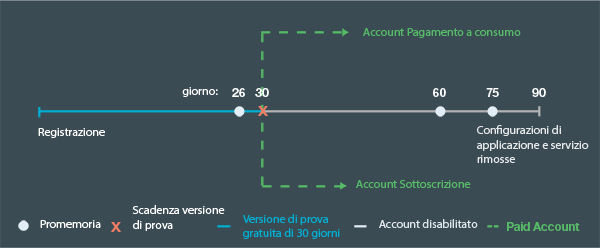
<style>
.page{position:relative;width:600px;height:248px;background:#3b4b54}
.page>*{position:absolute;margin:0}
.t1{font:11.9px "MyriadPro-Regular";color:#56bb66}
.t2{font:11.9px "MyriadPro-Regular";color:#ffffff}
.t3{font:11.9px "HelvNeueBoldforIBM";color:#ffffff}
.t4{font:12.7px "HelvNeueBoldforIBM";color:#f47d64;scale:1.17 1}
.t5{font:11.9px "MyriadPro-Regular";color:#e5e7e8}
.t6{font:11.9px "MyriadPro-Regular";color:#00aed1}
.t7{font:11.9px "MyriadPro-Regular";color:#dfe6eb}
.t8{font:11.9px "HelvNeueBoldforIBM";color:#56bb66}
</style>
<div class="page">
<p class="t1" style="left:363px;top:28px;width:158px;height:10px">Account Pagamento a consumo</p>
<p class="t2" style="left:182px;top:87px;width:36px;height:10px">giorno:</p>
<p class="t3" style="left:232px;top:88px;width:13px;height:9px">26</p>
<p class="t3" style="left:255px;top:88px;width:14px;height:9px">30</p>
<p class="t3" style="left:433px;top:88px;width:13px;height:9px">60</p>
<p class="t3" style="left:486px;top:88px;width:13px;height:9px">75</p>
<p class="t3" style="left:532px;top:88px;width:14px;height:9px">90</p>
<p class="t4" style="left:258px;top:106px;width:10px;height:10px">X</p>
<p class="t5" style="left:477px;top:125px;width:112px;height:38px">Configurazioni di<br>applicazione e servizio<br>rimosse</p>
<p class="t2" style="left:38px;top:128px;width:67px;height:10px">Registrazione</p>
<p class="t1" style="left:356px;top:180px;width:115px;height:8px">Account Sottoscrizione</p>
<p class="t2" style="left:132px;top:205px;width:93px;height:26px">Scadenza versione<br>di prova</p>
<p class="t2" style="left:40px;top:220px;width:61px;height:8px">Promemoria</p>
<p class="t4" style="left:111px;top:222px;width:10px;height:10px">X</p>
<p class="t6" style="left:243px;top:214px;width:97px;height:25px">Versione di prova<br>gratuita di 30 giorni</p>
<p class="t7" style="left:379px;top:219px;width:99px;height:9px">Account disabilitato</p>
<p class="t8" style="left:507px;top:222px;width:73px;height:9px">Paid Account</p>
</div>
